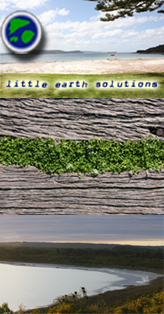
<style>
.page{position:relative;width:164px;height:314px}
.page>*{position:absolute;margin:0}
.t1{font:11.6px "DeadPostMan";color:#0d1c7d;font-weight:bold;font-style:italic}
</style>
<div class="page">
<p class="t1" style="left:6px;top:80px;width:151px;height:8px">little earth solutions</p>
</div>
